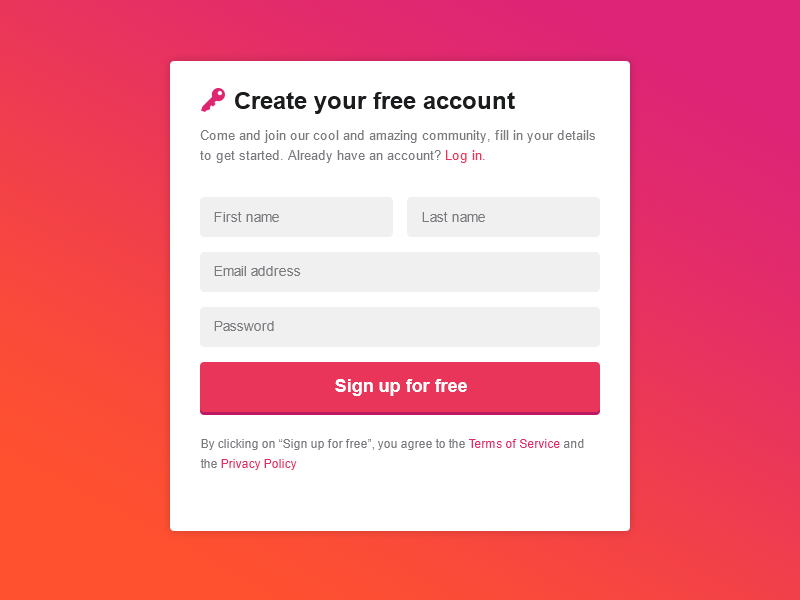
<style>
.page{position:relative;width:800px;height:600px;background:#ffffff}
.page>*{position:absolute;margin:0}
.t1{font:24px "Arial-BoldMT";color:#1b1c1d}
.t2{font:13px/20px "ArialMT";color:#7a7b7f}
.t3{font:13px/20px "ArialMT";color:#ea355a}
.t4{font:14px "ArialMT";color:#7a7b7f}
.t5{font:18px "Arial-BoldMT";color:#ffffff}
.t6{font:12px/20px "ArialMT";color:#7a7b7f}
.t7{font:12px/20px "ArialMT";color:#e12a6c}
.t8{font:12px/20px "ArialMT";color:#e52e66}
</style>
<div class="page">
<p class="t1" style="left:235px;top:92px;width:280px;height:22px">Create your free account</p>
<p class="t2" style="left:200px;top:130px;width:395px;height:33px">Come and join our cool and amazing community, fill in your details<br>to get started. Already have an account?<span class="t3"> Log in.</span></p>
<p class="t4" style="left:214px;top:212px;width:65px;height:10px">First name</p>
<p class="t4" style="left:422px;top:212px;width:63px;height:10px">Last name</p>
<p class="t4" style="left:214px;top:266px;width:87px;height:10px">Email address</p>
<p class="t4" style="left:214px;top:321px;width:60px;height:10px">Password</p>
<p class="t5" style="left:335px;top:379px;width:132px;height:17px">Sign up for free</p>
<p class="t6" style="left:200px;top:439px;width:384px;height:31px">By clicking on “Sign up for free”, you agree to the <span class="t7">Terms of Service</span> and <br>the <span class="t8">Privacy Policy</span></p>
</div>
